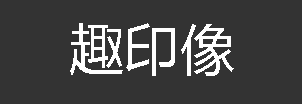
<style>
.page{position:relative;width:302px;height:104px;background:#333333}
.page>*{position:absolute;margin:0}
.t1{font:55px "MicrosoftYaHeiUI";color:#ffffff}
</style>
<div class="page">
<p class="t1" style="left:70px;top:23px;width:164px;height:53px">趣印像</p>
</div>
